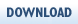
<style>
.page{position:relative;width:78px;height:24px}
.page>*{position:absolute;margin:0}
.t1{font:14px "Humanist521BT-BoldCondensed";color:#2d5078}
</style>
<div class="page">
<p class="t1" style="left:7px;top:7px;width:65px;height:11px">DOWNLOAD</p>
</div>
